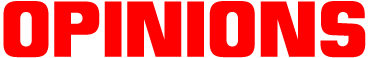
<style>
.page{position:relative;width:368px;height:58px;background:#ff0000}
.page>*{position:absolute;margin:0}
.t1{font:72px "NeographikMT";color:#ff0000}
</style>
<div class="page">
<p class="t1" style="left:3px;top:1px;width:363px;height:57px">OPINIONS</p>
</div>
